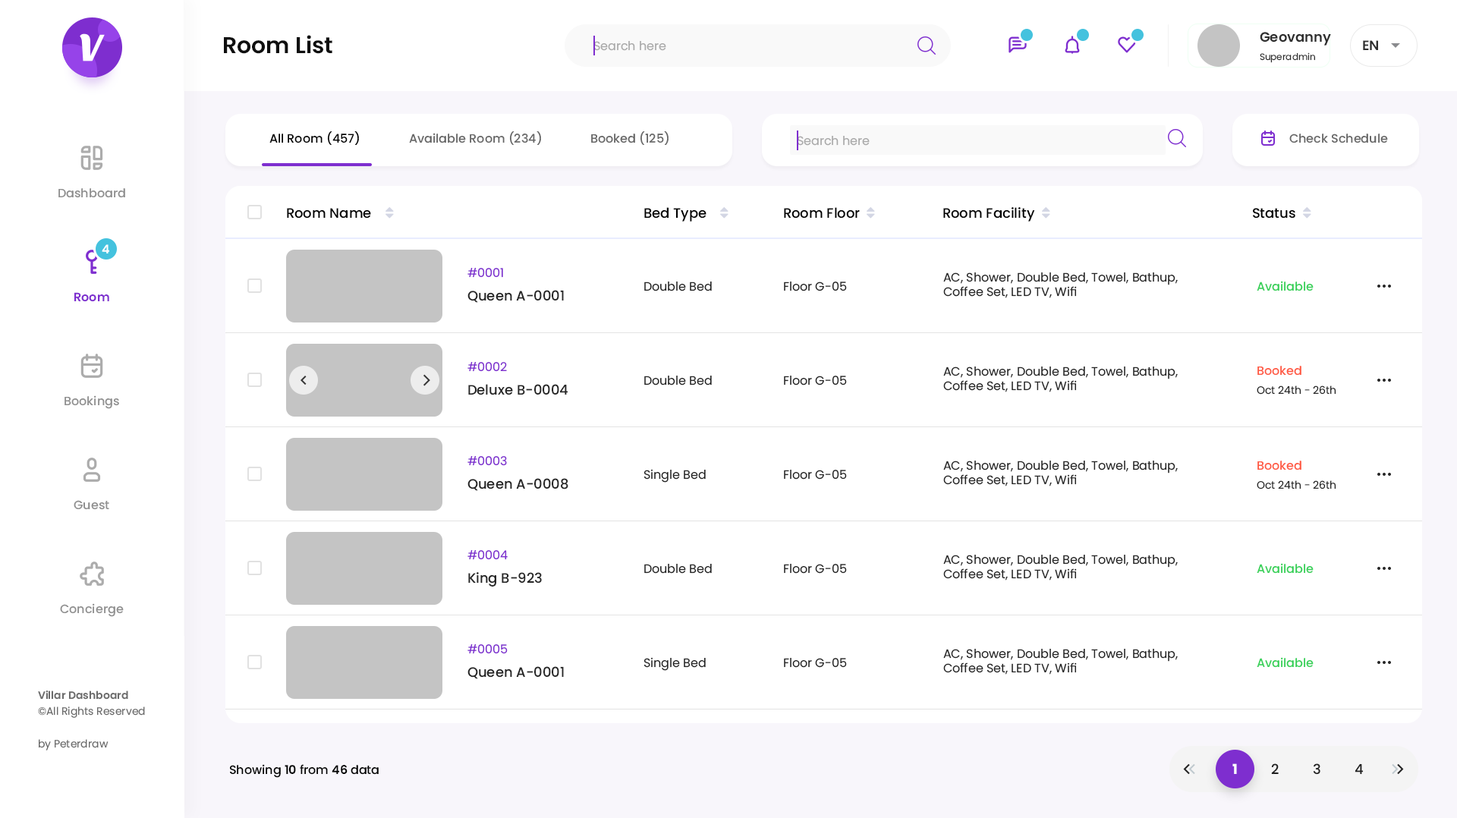
<style>
.page{position:relative;width:1457px;height:818px;background:#ffffff}
.page>*{position:absolute;margin:0}
.t1{font:22.8px "Poppins-SemiBold";color:#0f0f0f}
.t2{font:12.1px "Poppins-Regular";color:#aaaaaa}
.t3{font:13.7px "Poppins-SemiBold";color:#2e2e2e}
.t4{font:9.1px "Poppins-Regular";color:#2e2e2e}
.t5{font:12.1px "Poppins-Medium";color:#000000}
.t6{font:12.1px "Poppins-Medium";color:#666666}
.t7{font:12.1px "Poppins-Medium";color:#8f8f8f}
.t8{font:13.7px "Poppins-Medium";color:#000000}
.t9{font:12.1px "Poppins-SemiBold";color:#ffffff}
.t10{font:12.1px "Poppins-Regular";color:#7e2ecf}
.t11{font:12.1px "Poppins-Regular";color:#262626}
.t12{font:12.1px "Poppins-Medium";color:#37d159}
.t13{font:12.1px "Poppins-SemiBold";color:#7e2ecf}
.t14{font:13.7px "Poppins-Medium";color:#262626}
.t15{font:12.1px "Poppins-Medium";color:#ff5942}
.t16{font:10.6px "Poppins-Regular";color:#262626}
.t17{font:10.6px "Poppins-SemiBold";color:#6b6b6b}
.t18{font:10.6px "Poppins-Regular";color:#6b6b6b}
.t19{font:12.1px "Poppins-SemiBold";color:#000000}
.t20{font:13.7px "Poppins-Bold";color:#ffffff}
.t21{font:13.7px "Poppins-Medium";color:#202020}
</style>
<div class="page">
<p class="t1" style="left:224px;top:35px;width:108px;height:19px">Room List</p>
<p class="t2" style="left:594px;top:41px;width:72px;height:10px">Search here</p>
<p class="t3" style="left:1260px;top:32px;width:71px;height:14px">Geovanny</p>
<p class="t3" style="left:1363px;top:40px;width:15px;height:10px">EN</p>
<p class="t4" style="left:1260px;top:52px;width:55px;height:11px">Superadmin</p>
<p class="t5" style="left:269px;top:131px;width:90px;height:14px">All Room (457)</p>
<p class="t6" style="left:409px;top:131px;width:132px;height:14px">Available Room (234)</p>
<p class="t6" style="left:591px;top:131px;width:78px;height:14px">Booked (125)</p>
<p class="t2" style="left:797px;top:136px;width:73px;height:10px">Search here</p>
<p class="t6" style="left:1290px;top:134px;width:98px;height:9px">Check Schedule</p>
<p class="t7" style="left:58px;top:188px;width:67px;height:10px">Dashboard</p>
<p class="t8" style="left:287px;top:208px;width:84px;height:11px">Room Name</p>
<p class="t8" style="left:644px;top:207px;width:63px;height:15px">Bed Type</p>
<p class="t8" style="left:784px;top:207px;width:76px;height:12px">Room Floor</p>
<p class="t8" style="left:943px;top:207px;width:92px;height:15px">Room Facility</p>
<p class="t8" style="left:1253px;top:208px;width:43px;height:11px">Status</p>
<p class="t9" style="left:102px;top:244px;width:7px;height:10px">4</p>
<p class="t10" style="left:468px;top:268px;width:35px;height:10px">#0001</p>
<p class="t11" style="left:644px;top:282px;width:68px;height:9px">Double Bed</p>
<p class="t11" style="left:784px;top:282px;width:63px;height:9px">Floor G-05</p>
<p class="t11" style="left:943px;top:272px;width:235px;height:26px">AC, Shower, Double Bed, Towel, Bathup, Coffee Set, LED TV, Wifi</p>
<p class="t12" style="left:1257px;top:281px;width:57px;height:10px">Available</p>
<p class="t13" style="left:74px;top:292px;width:35px;height:10px">Room</p>
<p class="t14" style="left:468px;top:290px;width:96px;height:13px">Queen A-0001</p>
<p class="t10" style="left:468px;top:362px;width:39px;height:10px">#0002</p>
<p class="t15" style="left:1258px;top:366px;width:44px;height:10px">Booked</p>
<p class="t11" style="left:644px;top:376px;width:68px;height:10px">Double Bed</p>
<p class="t11" style="left:784px;top:376px;width:63px;height:10px">Floor G-05</p>
<p class="t11" style="left:943px;top:367px;width:235px;height:25px">AC, Shower, Double Bed, Towel, Bathup, Coffee Set, LED TV, Wifi</p>
<p class="t14" style="left:468px;top:384px;width:101px;height:11px">Deluxe B-0004</p>
<p class="t16" style="left:1257px;top:386px;width:80px;height:9px">Oct 24th - 26th</p>
<p class="t7" style="left:65px;top:395px;width:54px;height:14px">Bookings</p>
<p class="t10" style="left:468px;top:456px;width:39px;height:10px">#0003</p>
<p class="t11" style="left:943px;top:461px;width:235px;height:26px">AC, Shower, Double Bed, Towel, Bathup, Coffee Set, LED TV, Wifi</p>
<p class="t15" style="left:1258px;top:461px;width:44px;height:10px">Booked</p>
<p class="t11" style="left:644px;top:469px;width:62px;height:14px">Single Bed</p>
<p class="t11" style="left:784px;top:470px;width:63px;height:10px">Floor G-05</p>
<p class="t14" style="left:468px;top:478px;width:101px;height:13px">Queen A-0008</p>
<p class="t16" style="left:1257px;top:480px;width:80px;height:10px">Oct 24th - 26th</p>
<p class="t7" style="left:74px;top:500px;width:35px;height:10px">Guest</p>
<p class="t10" style="left:468px;top:550px;width:40px;height:10px">#0004</p>
<p class="t11" style="left:943px;top:555px;width:235px;height:26px">AC, Shower, Double Bed, Towel, Bathup, Coffee Set, LED TV, Wifi</p>
<p class="t11" style="left:644px;top:564px;width:68px;height:10px">Double Bed</p>
<p class="t11" style="left:784px;top:564px;width:63px;height:10px">Floor G-05</p>
<p class="t12" style="left:1257px;top:563px;width:57px;height:11px">Available</p>
<p class="t14" style="left:468px;top:572px;width:74px;height:15px">King B-923</p>
<p class="t7" style="left:60px;top:603px;width:64px;height:14px">Concierge</p>
<p class="t10" style="left:468px;top:644px;width:40px;height:10px">#0005</p>
<p class="t11" style="left:943px;top:649px;width:235px;height:26px">AC, Shower, Double Bed, Towel, Bathup, Coffee Set, LED TV, Wifi</p>
<p class="t11" style="left:644px;top:657px;width:62px;height:14px">Single Bed</p>
<p class="t11" style="left:784px;top:658px;width:63px;height:10px">Floor G-05</p>
<p class="t12" style="left:1257px;top:657px;width:57px;height:11px">Available</p>
<p class="t14" style="left:468px;top:666px;width:96px;height:13px">Queen A-0001</p>
<p class="t17" style="left:38px;top:691px;width:90px;height:9px">Villar Dashboard</p>
<p class="t18" style="left:38px;top:707px;width:107px;height:11px">©All Rights Reserved</p>
<p class="t18" style="left:39px;top:739px;width:70px;height:12px">by Peterdraw</p>
<p class="t5" style="left:230px;top:764px;width:149px;height:14px">Showing <span class="t19">10 </span>from <span class="t19">46 </span>data</p>
<p class="t20" style="left:1233px;top:764px;width:4px;height:10px">1</p>
<p class="t21" style="left:1271px;top:764px;width:8px;height:10px">2</p>
<p class="t21" style="left:1313px;top:764px;width:8px;height:11px">3</p>
<p class="t21" style="left:1355px;top:764px;width:9px;height:11px">4</p>
</div>
